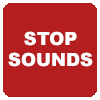
<style>
.page{position:relative;width:100px;height:100px;background:#b41e1e}
.page>*{position:absolute;margin:0}
.t1{font:18.2px "Arial-Black";color:#ffffff}
</style>
<div class="page">
<p class="t1" style="left:8px;top:31px;width:85px;height:36px;text-align:center">STOP<br>SOUNDS</p>
</div>
